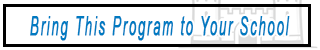
<style>
.page{position:relative;width:320px;height:50px;background:#ffffff}
.page>*{position:absolute;margin:0}
.t1{font:25.5px "Arial-ItalicMT";letter-spacing:0.1em;color:#007ac1;font-weight:bold;scale:0.52 1}
</style>
<div class="page">
<p class="t1" style="left:30px;top:16px;width:260px;height:25px">Bring This Program to Your School</p>
</div>
